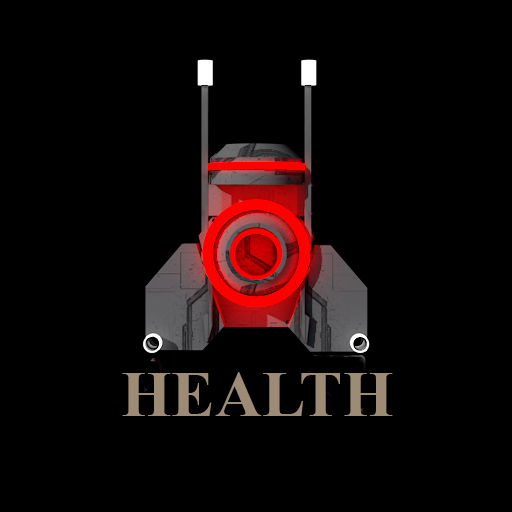
<style>
.page{position:relative;width:512px;height:512px;background:#000000}
.page>*{position:absolute;margin:0}
.t1{font:65px "TimesNewRomanPS-BoldMT";color:#9e8b75}
</style>
<div class="page">
<p class="t1" style="left:122px;top:372px;width:271px;height:44px">HEALTH</p>
</div>
